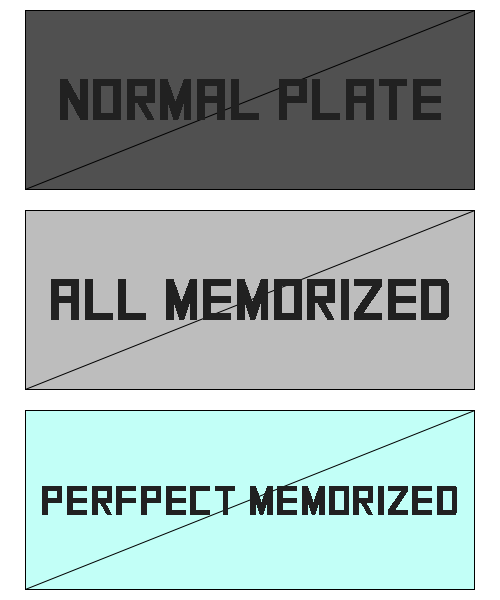
<style>
.page{position:relative;width:500px;height:600px;background:#c2fff7}
.page>*{position:absolute;margin:0}
.t1{font:57.9px "SquareFont";color:#212121}
.t2{font:42.5px "SquareFont";color:#212121}
</style>
<div class="page">
<p class="t1" style="left:60px;top:79px;width:381px;height:41px">Normal plate</p>
<p class="t1" style="left:51px;top:279px;width:398px;height:41px">All Memorized</p>
<p class="t2" style="left:42px;top:486px;width:415px;height:29px">Perfpect Memorized</p>
</div>
